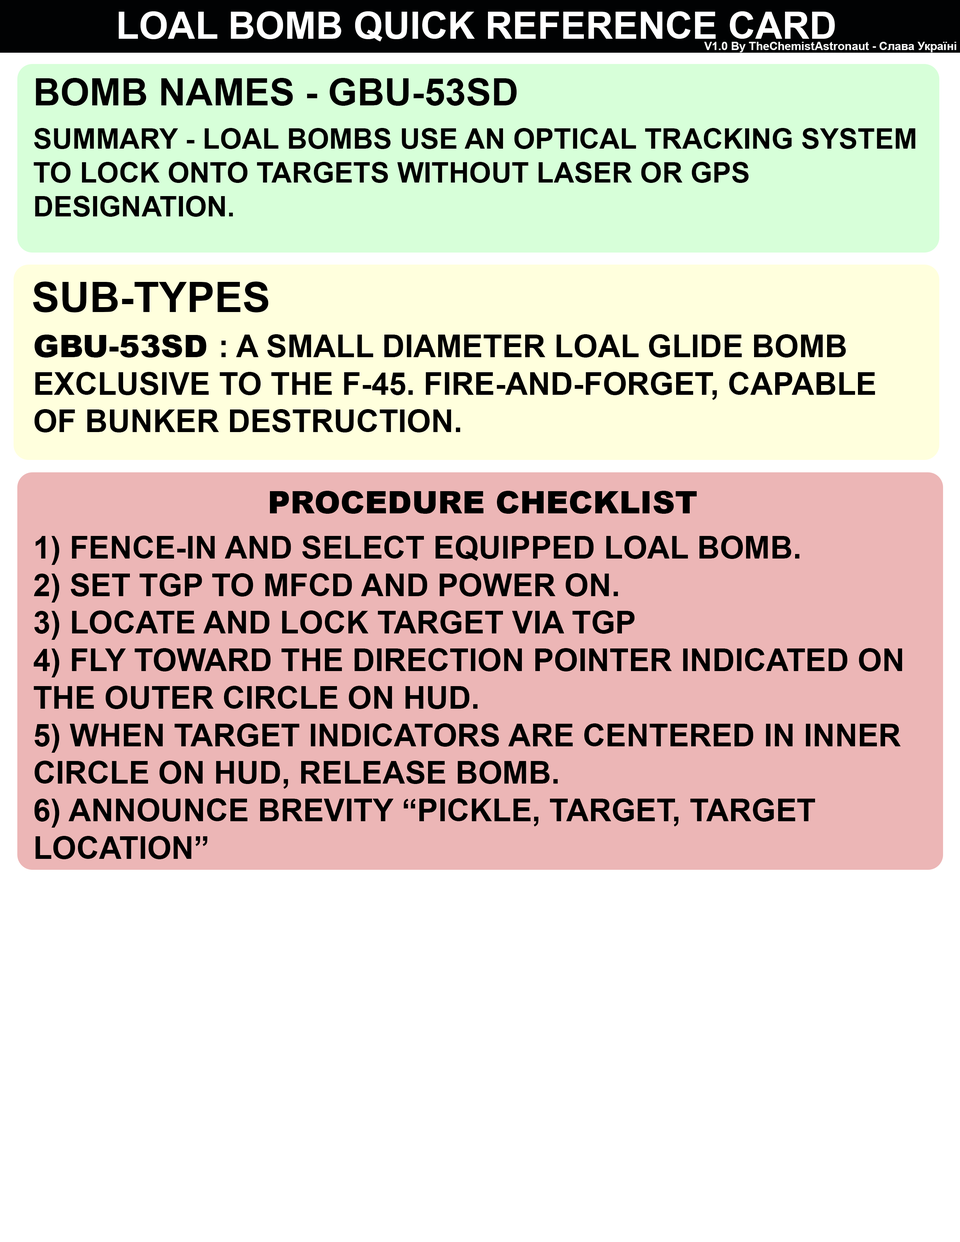
<style>
.page{position:relative;width:960px;height:1242px;background:#ffffff}
.page>*{position:absolute;margin:0}
.t1{font:37.6px "Arial-BoldMT";color:#ffffff}
.t2{font:11.5px "Arial-BoldMT";color:#ffffff}
.t3{font:37.6px "Arial-BoldMT";color:#000000}
.t4{font:28.2px "Arial-BoldMT";color:#000000}
.t5{font:41.7px "Arial-BoldMT";color:#000000}
.t6{font:31.3px "Arial-BoldMT";color:#000000}
.t7{font:31.3px "Arial-Black";color:#000000}
.t8{font:31.4px "Arial-Black";color:#000000}
</style>
<div class="page">
<p class="t1" style="left:119px;top:11px;width:716px;height:30px">LOAL BOMB QUICK REFERENCE CARD</p>
<p class="t2" style="left:704px;top:42px;width:252px;height:10px">V1.0 By TheChemistAstronaut - Слава Україні</p>
<p class="t3" style="left:36px;top:78px;width:481px;height:28px">BOMB NAMES - GBU-53SD</p>
<p class="t4" style="left:34px;top:128px;width:881px;height:89px">SUMMARY - LOAL BOMBS USE AN OPTICAL TRACKING SYSTEM TO LOCK ONTO TARGETS WITHOUT LASER OR GPS DESIGNATION.</p>
<p class="t5" style="left:33px;top:282px;width:235px;height:30px">SUB-TYPES</p>
<p class="t6" style="left:34px;top:334px;width:841px;height:99px"><span class="t7">GBU-53SD </span>: A SMALL DIAMETER LOAL GLIDE BOMB EXCLUSIVE TO THE F-45. FIRE-AND-FORGET, CAPABLE OF BUNKER DESTRUCTION.</p>
<p class="t8" style="left:270px;top:491px;width:427px;height:23px">PROCEDURE CHECKLIST</p>
<p class="t6" style="left:34px;top:536px;width:868px;height:323px">1) FENCE-IN AND SELECT EQUIPPED LOAL BOMB.<br>2) SET TGP TO MFCD AND POWER ON.<br>3) LOCATE AND LOCK TARGET VIA TGP<br>4) FLY TOWARD THE DIRECTION POINTER INDICATED ON THE OUTER CIRCLE ON HUD.<br>5) WHEN TARGET INDICATORS ARE CENTERED IN INNER CIRCLE ON HUD, RELEASE BOMB.<br>6) ANNOUNCE BREVITY “PICKLE, TARGET, TARGET LOCATION”</p>
</div>
